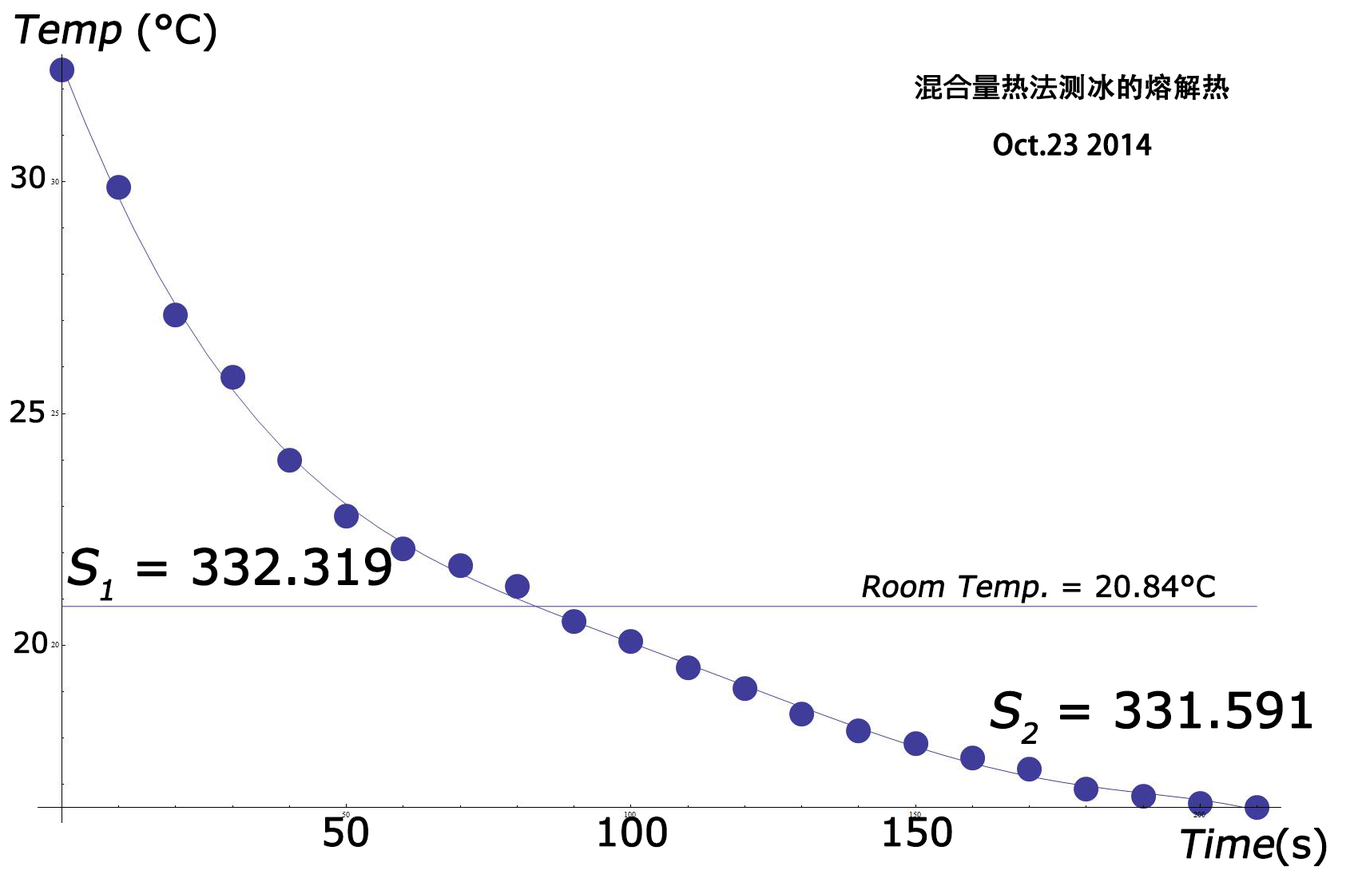
<style>
.page{position:relative;width:1358px;height:878px;background:#ffffff}
.page>*{position:absolute;margin:0}
.t1{font:38.3px "Meiryo";color:#000000;font-weight:bold;font-style:italic}
.t2{font:38.3px "Meiryo";color:#000000;font-weight:bold}
.t3{font:47.9px "AdobeHeitiStd-Regular";color:#000000;font-weight:bold}
.t4{font:47.9px "Meiryo";color:#000000;font-weight:bold}
.t5{font:28.7px "Meiryo";color:#000000;font-weight:bold}
.t6{font:47.9px "Meiryo";color:#000000;font-weight:bold;font-style:italic}
.t7{font:28.7px "Meiryo";color:#000000;font-weight:bold;font-style:italic}
</style>
<div class="page">
<p class="t1" style="left:14px;top:13px;width:202px;height:39px">Temp<span class="t2"> (°C)</span></p>
<p class="t3" style="left:914px;top:73px;width:315px;height:83px;text-align:center"><span class="t4">混合量</span>热<span class="t4">法</span>测冰的熔解热<br>Oct.23 2014</p>
<p class="t5" style="left:11px;top:165px;width:35px;height:23px">30</p>
<p class="t5" style="left:10px;top:400px;width:35px;height:23px">25</p>
<p class="t4" style="left:67px;top:548px;width:324px;height:53px"><span class="t6">S1</span> = 332.319</p>
<p class="t7" style="left:862px;top:575px;width:353px;height:29px">Room Temp.<span class="t5"> = 20.84°C</span></p>
<p class="t4" style="left:14px;top:631px;width:34px;height:23px">20</p>
<p class="t4" style="left:989px;top:691px;width:323px;height:53px"><span class="t6">S2</span> = 331.591</p>
<p class="t2" style="left:323px;top:816px;width:45px;height:31px">50</p>
<p class="t2" style="left:599px;top:817px;width:68px;height:31px">100</p>
<p class="t2" style="left:884px;top:816px;width:68px;height:31px">150</p>
<p class="t1" style="left:1180px;top:828px;width:146px;height:39px">Time<span class="t2">(s)</span></p>
</div>
